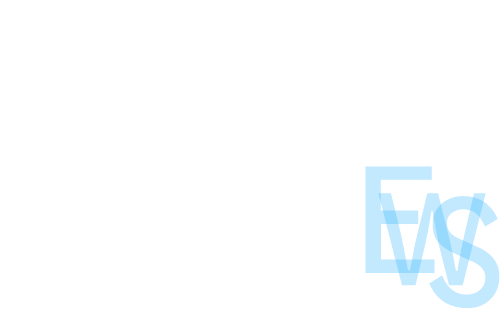
<style>
.page{position:relative;width:503px;height:314px;background:#ffffff}
.page>*{position:absolute;margin:0}
.t1{font:145px "BellGothicStd-Bold";color:#c2e9fe}
.t2{font:125px "BellGothicStd-Bold"}
</style>
<div class="page">
<p class="t1" style="left:365px;top:166px;width:70px;height:107px">E</p>
<p class="t2" style="left:378px;top:193px;width:108px;height:93px">W</p>
<p class="t1" style="left:429px;top:196px;width:71px;height:112px">S</p>
</div>
